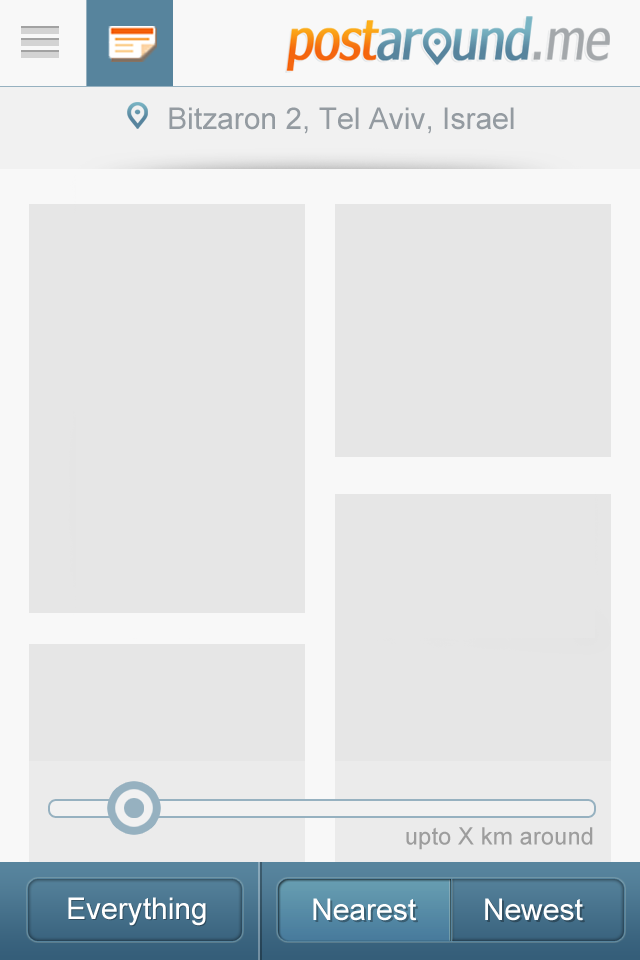
<style>
.page{position:relative;width:640px;height:960px;background:#e6e6e6}
.page>*{position:absolute;margin:0}
.t1{font:30px "ArialMT";color:#949ba1}
.t2{font:24px "ArialMT";color:#9d9d9d}
.t3{font:30px "ArialMT";color:#ffffff}
.t4{font:30px "ArialMT"}
</style>
<div class="page">
<p class="t1" style="left:169px;top:107px;width:345px;height:27px">Bitzaron 2, Tel Aviv, Israel</p>
<p class="t2" style="left:406px;top:827px;width:187px;height:23px">upto X km around</p>
<p class="t3" style="left:68px;top:897px;width:138px;height:29px">Everything</p>
<p class="t4" style="left:69px;top:898px;width:138px;height:29px">Everything</p>
<p class="t3" style="left:313px;top:898px;width:270px;height:23px">Nearest        Newest</p>
</div>
